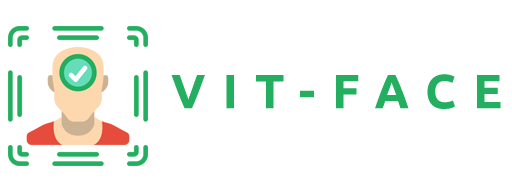
<style>
.page{position:relative;width:512px;height:184px;background:#ffffff}
.page>*{position:absolute;margin:0}
.t1{font:48px "Ubuntu-Bold";letter-spacing:-0.54em;color:#24ae5f}
</style>
<div class="page">
<p class="t1" style="left:171px;top:74px;width:330px;height:35px">VIT-FACE</p>
</div>
